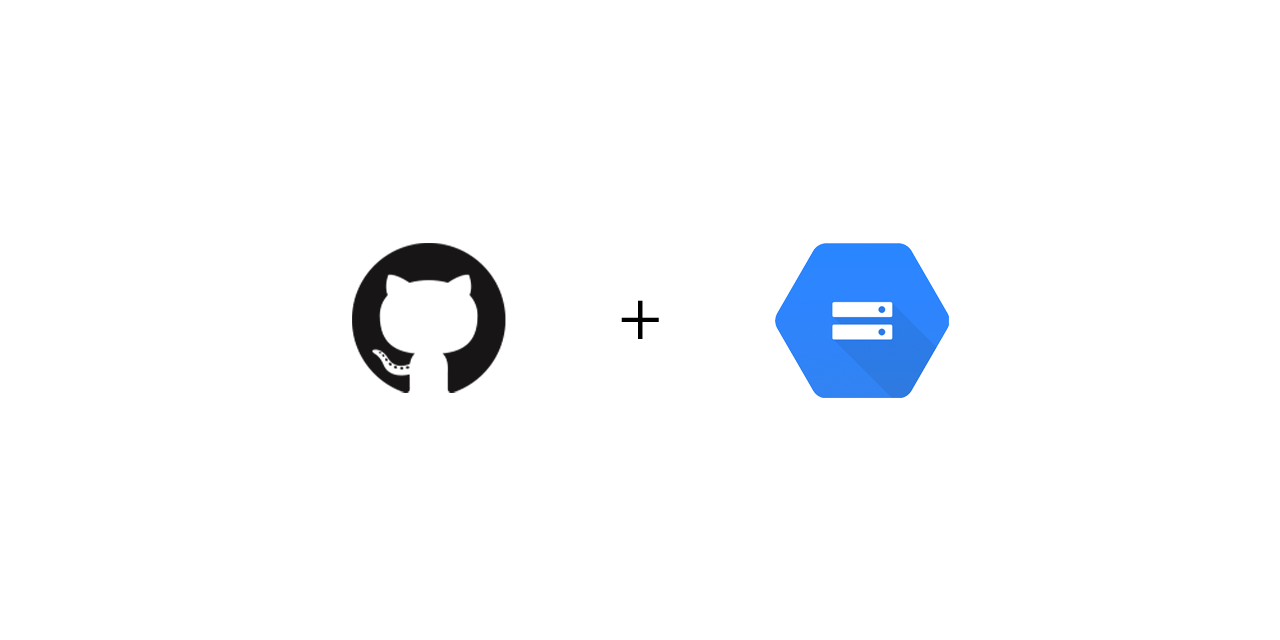
<style>
.page{position:relative;width:1280px;height:640px;background:#ffffff}
.page>*{position:absolute;margin:0}
.t1{font:72px "MyriadPro-Regular";color:#000000}
</style>
<div class="page">
<p class="t1" style="left:621px;top:300px;width:38px;height:39px">+</p>
</div>
